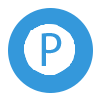
<style>
.page{position:relative;width:100px;height:100px;background:#ffffff}
.page>*{position:absolute;margin:0}
.t1{font:48px "MyriadPro-Regular";color:#3498db}
</style>
<div class="page">
<p class="t1" style="left:41px;top:33px;width:21px;height:33px">P</p>
</div>
